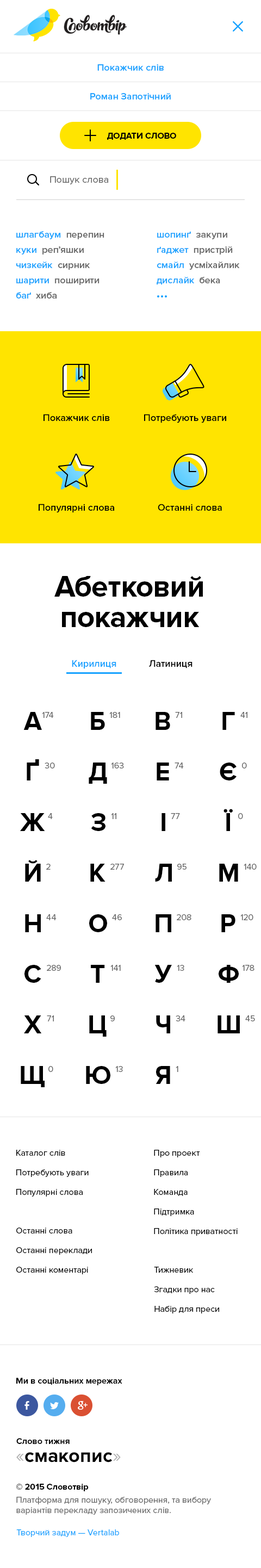
<style>
.page{position:relative;width:261px;height:1568px;background:#ffffff}
.page>*{position:absolute;margin:0}
.t1{font:9.8px "ProximaNova-Semibold";color:#17a2ff}
.t2{font:8.7px "ProximaNova-Bold";color:#000000;text-transform:uppercase}
.t3{font:9.8px "ProximaNova-Regular";color:#666666}
.t4{font:9.8px/15.2px "ProximaNova-Semibold";color:#17a2ff}
.t5{font:9.8px/15.2px "ProximaNova-Semibold";color:#666666}
.t6{font:9.8px "ProximaNova-Semibold";color:#000000}
.t7{font:30.5px/30.5px "ProximaNova-Bold";color:#000000}
.t8{font:26.1px "ProximaNova-Bold";color:#000000}
.t9{font:8.7px "ProximaNova-Regular";color:#666666}
.t10{font:8.7px/19.6px "ProximaNova-Regular";color:#000000}
.t11{font:8.7px/19.6px "ProximaNova-Regular";color:#010101}
.t12{font:8.7px "ProximaNova-Bold";color:#010101}
.t13{font:19.6px "ProximaNova-Bold";color:#000000}
.t14{font:19.6px "ProximaNova-Regular";color:#b3b3b3}
.t15{font:8.7px/12px "ProximaNova-Bold";color:#000000}
.t16{font:8.7px/13.1px "ProximaNova-Regular";color:#666666}
.t17{font:8.7px "ProximaNova-Regular";color:#17a2ff}
</style>
<div class="page">
<p class="t1" style="left:97px;top:64px;width:67px;height:7px">Покажчик слів</p>
<p class="t1" style="left:90px;top:93px;width:81px;height:7px">Роман Запотічний</p>
<p class="t2" style="left:107px;top:133px;width:69px;height:7px">Додати Слово</p>
<p class="t3" style="left:50px;top:176px;width:58px;height:8px">Пошук слова</p>
<p class="t4" style="left:16px;top:231px;width:88px;height:68px">шлагбаум  <span class="t5">перепин<br></span>куки  <span class="t5">реп’яшки<br></span>чизкейк  <span class="t5">сирник<br></span>шарити  <span class="t5">поширити<br></span>баґ  <span class="t5">хиба</span></p>
<p class="t5" style="left:157px;top:231px;width:83px;height:54px"><span class="t4">шопинґ  </span>закупи<br><span class="t4">ґаджет  </span>пристрій<br><span class="t4">смайл  </span>усміхайлик<br><span class="t4">дислайк  </span>бека</p>
<p class="t6" style="left:44px;top:414px;width:66px;height:7px">Покажчик слів</p>
<p class="t6" style="left:144px;top:414px;width:82px;height:9px">Потребують уваги</p>
<p class="t6" style="left:39px;top:504px;width:75px;height:9px">Популярні слова</p>
<p class="t6" style="left:158px;top:504px;width:64px;height:7px">Останні слова</p>
<p class="t7" style="left:54px;top:576px;width:149px;height:51px;text-align:center">Абетковий<br>покажчик</p>
<p class="t1" style="left:72px;top:660px;width:44px;height:9px">Кирилиця</p>
<p class="t6" style="left:149px;top:660px;width:44px;height:8px">Латиниця</p>
<p class="t8" style="left:23px;top:712px;width:19px;height:18px">А</p>
<p class="t9" style="left:42px;top:712px;width:12px;height:6px">174</p>
<p class="t8" style="left:91px;top:712px;width:14px;height:18px">Б</p>
<p class="t9" style="left:109px;top:712px;width:11px;height:6px">181</p>
<p class="t8" style="left:156px;top:712px;width:14px;height:18px">В</p>
<p class="t9" style="left:175px;top:712px;width:7px;height:6px">71</p>
<p class="t8" style="left:222px;top:712px;width:13px;height:18px">Г</p>
<p class="t9" style="left:240px;top:712px;width:7px;height:6px">41</p>
<p class="t8" style="left:27px;top:759px;width:12px;height:21px">Ґ</p>
<p class="t9" style="left:45px;top:763px;width:10px;height:5px">30</p>
<p class="t8" style="left:89px;top:763px;width:18px;height:21px">Д</p>
<p class="t9" style="left:111px;top:763px;width:13px;height:5px">163</p>
<p class="t8" style="left:157px;top:763px;width:12px;height:17px">Е</p>
<p class="t9" style="left:175px;top:763px;width:9px;height:5px">74</p>
<p class="t8" style="left:220px;top:763px;width:17px;height:17px">Є</p>
<p class="t9" style="left:242px;top:763px;width:5px;height:5px">0</p>
<p class="t8" style="left:224px;top:809px;width:9px;height:22px">Ї</p>
<p class="t8" style="left:20px;top:813px;width:25px;height:18px">Ж</p>
<p class="t9" style="left:48px;top:813px;width:5px;height:6px">4</p>
<p class="t8" style="left:91px;top:813px;width:15px;height:18px">З</p>
<p class="t9" style="left:111px;top:813px;width:5px;height:6px">11</p>
<p class="t8" style="left:162px;top:813px;width:3px;height:18px">І</p>
<p class="t9" style="left:171px;top:813px;width:9px;height:6px">77</p>
<p class="t9" style="left:238px;top:813px;width:5px;height:6px">0</p>
<p class="t8" style="left:25px;top:860px;width:16px;height:22px">Й</p>
<p class="t9" style="left:46px;top:864px;width:5px;height:6px">2</p>
<p class="t8" style="left:90px;top:864px;width:16px;height:18px">К</p>
<p class="t9" style="left:110px;top:864px;width:14px;height:6px">277</p>
<p class="t8" style="left:155px;top:864px;width:17px;height:18px">Л</p>
<p class="t9" style="left:177px;top:864px;width:10px;height:6px">95</p>
<p class="t8" style="left:219px;top:864px;width:19px;height:18px">М</p>
<p class="t9" style="left:244px;top:864px;width:13px;height:6px">140</p>
<p class="t8" style="left:25px;top:914px;width:16px;height:18px">Н</p>
<p class="t9" style="left:46px;top:914px;width:11px;height:6px">44</p>
<p class="t8" style="left:89px;top:914px;width:18px;height:18px">О</p>
<p class="t9" style="left:112px;top:914px;width:10px;height:6px">46</p>
<p class="t8" style="left:156px;top:914px;width:15px;height:18px">П</p>
<p class="t9" style="left:177px;top:914px;width:14px;height:6px">208</p>
<p class="t8" style="left:221px;top:914px;width:14px;height:18px">Р</p>
<p class="t9" style="left:240px;top:914px;width:13px;height:6px">120</p>
<p class="t8" style="left:24px;top:965px;width:17px;height:18px">С</p>
<p class="t9" style="left:47px;top:965px;width:14px;height:6px">289</p>
<p class="t8" style="left:91px;top:965px;width:14px;height:18px">Т</p>
<p class="t9" style="left:110px;top:965px;width:11px;height:6px">141</p>
<p class="t8" style="left:154px;top:965px;width:18px;height:18px">У</p>
<p class="t9" style="left:177px;top:965px;width:7px;height:6px">13</p>
<p class="t8" style="left:219px;top:965px;width:20px;height:18px">Ф</p>
<p class="t9" style="left:242px;top:965px;width:13px;height:6px">178</p>
<p class="t8" style="left:24px;top:1015px;width:18px;height:18px">Х</p>
<p class="t9" style="left:47px;top:1015px;width:7px;height:6px">71</p>
<p class="t8" style="left:89px;top:1015px;width:18px;height:22px">Ц</p>
<p class="t9" style="left:110px;top:1015px;width:5px;height:6px">9</p>
<p class="t8" style="left:156px;top:1015px;width:14px;height:18px">Ч</p>
<p class="t9" style="left:176px;top:1015px;width:9px;height:6px">34</p>
<p class="t8" style="left:218px;top:1015px;width:22px;height:18px">Ш</p>
<p class="t9" style="left:245px;top:1015px;width:10px;height:6px">45</p>
<p class="t8" style="left:21px;top:1066px;width:24px;height:21px">Щ</p>
<p class="t9" style="left:48px;top:1066px;width:5px;height:6px">0</p>
<p class="t8" style="left:86px;top:1066px;width:24px;height:18px">Ю</p>
<p class="t9" style="left:115px;top:1066px;width:8px;height:6px">13</p>
<p class="t8" style="left:156px;top:1066px;width:14px;height:18px">Я</p>
<p class="t9" style="left:176px;top:1066px;width:2px;height:6px">1</p>
<p class="t10" style="left:16px;top:1150px;width:73px;height:47px">Каталог слів<br>Потребують уваги<br>Популярні слова</p>
<p class="t10" style="left:154px;top:1150px;width:84px;height:86px">Про проект<br>Правила<br>Команда<br>Підтримка<br>Політика приватності</p>
<p class="t10" style="left:16px;top:1228px;width:76px;height:46px">Останні слова<br>Останні переклади<br>Останні коментарі</p>
<p class="t11" style="left:154px;top:1267px;width:65px;height:46px">Тижневик<br>Згадки про нас<br>Набір для преси</p>
<p class="t12" style="left:16px;top:1378px;width:106px;height:7px">Ми в соціальних мережах</p>
<p class="t12" style="left:16px;top:1438px;width:54px;height:6px">Слово тижня</p>
<p class="t13" style="left:16px;top:1452px;width:105px;height:10px"><span class="t14">«</span>смакопис<span class="t14">»</span></p>
<p class="t9" style="left:16px;top:1484px;width:195px;height:31px"><span class="t15">© 2015 Словотвір<br></span><span class="t16">Платформа для пошуку, обговорення, </span>та вибору<br>варіантів перекладу запозичених слів.</p>
<p class="t17" style="left:16px;top:1529px;width:103px;height:8px">Творчий задум — Vertalab</p>
</div>
